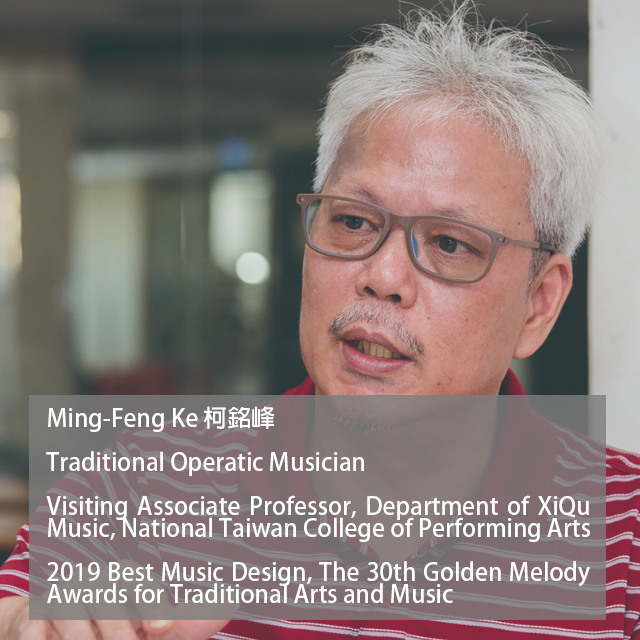
<style>
.page{position:relative;width:640px;height:640px}
.page>*{position:absolute;margin:0}
.t1{font:24px/22px "AdobeFanHeitiStd-Bold";color:#ffffff}
</style>
<div class="page">
<p class="t1" style="left:46px;top:406px;width:544px;height:197px;text-align:justify">Ming-Feng Ke 柯銘峰<br><br>Traditional Operatic Musician<br><br>Visiting Associate Professor, Department of XiQu Music, National Taiwan College of Performing Arts<br><br>2019 Best Music Design, The 30th Golden Melody Awards for Traditional Arts and Music</p>
</div>
